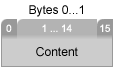
<style>
.page{position:relative;width:114px;height:68px;background:#cccccc}
.page>*{position:absolute;margin:0}
.t1{font:12px "ArialMT";color:#000000}
.t2{font:10px "ArialMT";color:#ffffff}
</style>
<div class="page">
<p class="t1" style="left:29px;top:5px;width:54px;height:12px">Bytes 0...1</p>
<p class="t2" style="left:6px;top:24px;width:6px;height:8px">0</p>
<p class="t2" style="left:42px;top:24px;width:30px;height:8px">1 ... 14</p>
<p class="t2" style="left:100px;top:24px;width:11px;height:8px">15</p>
<p class="t1" style="left:36px;top:47px;width:42px;height:10px">Content</p>
</div>
